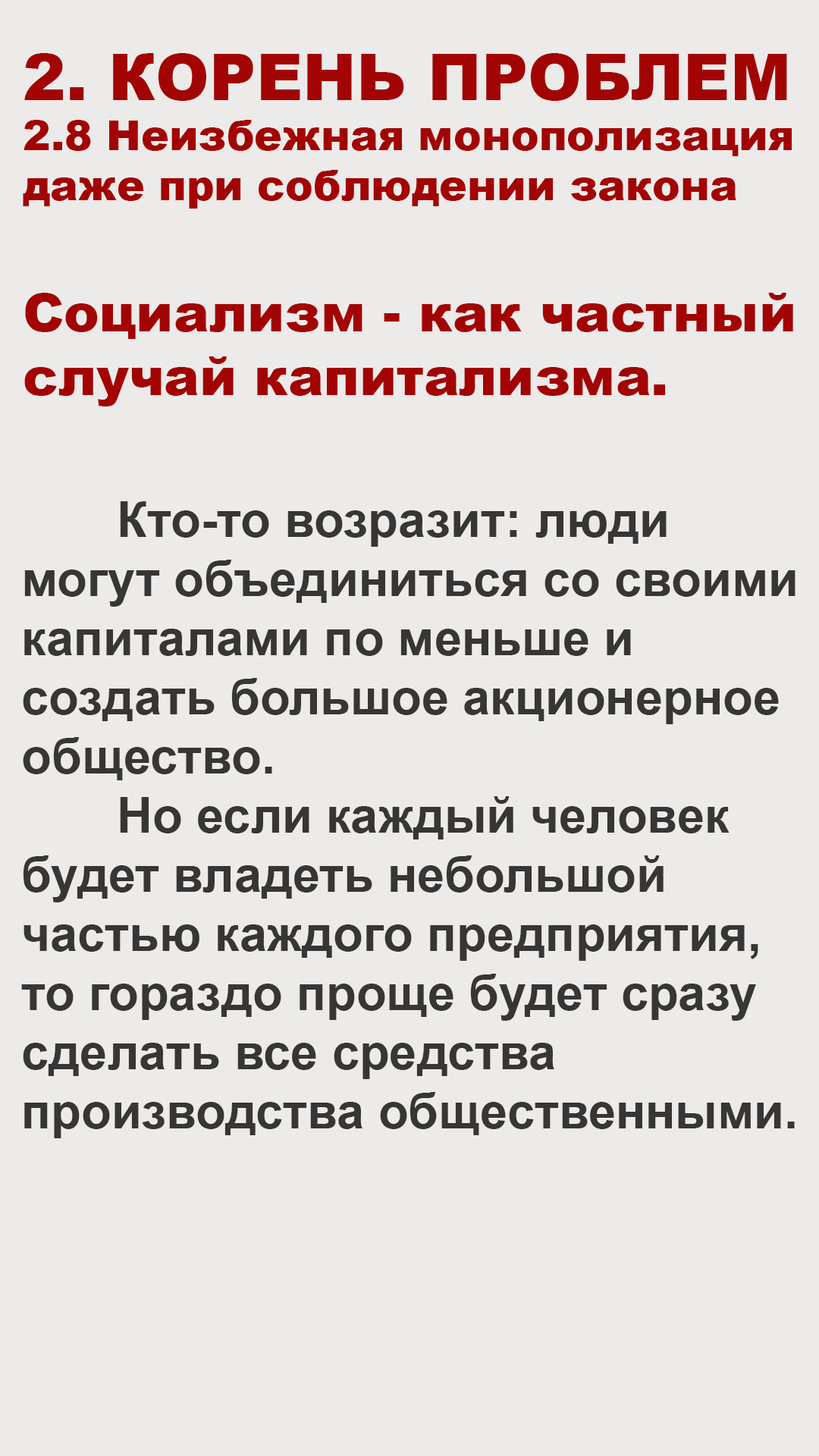
<style>
.page{position:relative;width:819px;height:1456px;background:#ecebe9}
.page>*{position:absolute;margin:0}
.t1{font:41.7px "Arial-Black";color:#a20403}
.t2{font:64.5px "Arial-Black";color:#a20403}
.t3{font:53.1px "Arial-Black";color:#a20403}
.t4{font:49.3px "Arial-BoldMT";color:#373634}
</style>
<div class="page">
<p class="t1" style="left:23px;top:53px;width:770px;height:353px"><span class="t2">2. КОРЕНЬ ПРОБЛЕМ<br></span>2.8 Неизбежная монополизация<br>даже при соблюдении закона<br><br><span class="t3">Социализм - как частный<br>случай капитализма.</span></p>
<p class="t4" style="left:21px;top:501px;width:774px;height:637px">Кто-то возразит: люди<br>могут объединиться со своими<br>капиталами по меньше и <br>создать большое акционерное <br>общество.<br>       Но если каждый человек<br>будет владеть небольшой<br>частью каждого предприятия,<br>то гораздо проще будет сразу<br>сделать все средства <br>производства общественными.</p>
</div>
